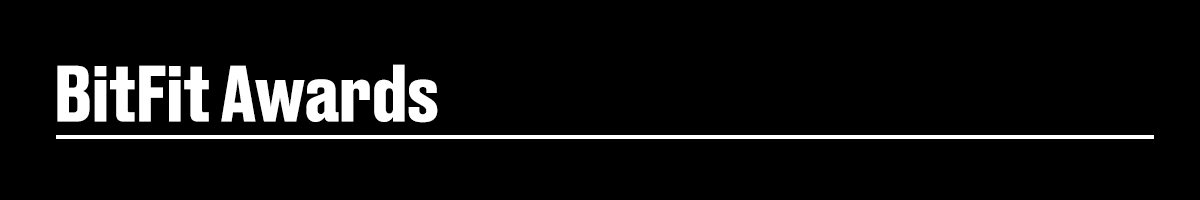
<style>
.page{position:relative;width:1200px;height:200px;background:#000000}
.page>*{position:absolute;margin:0}
.t1{font:75px "DrukTextTrial-Bold";letter-spacing:-0.02em;color:#ffffff}
</style>
<div class="page">
<p class="t1" style="left:57px;top:64px;width:381px;height:59px">BitFit Awards</p>
</div>
